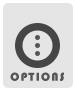
<style>
.page{position:relative;width:75px;height:90px;background:#e5e5e5}
.page>*{position:absolute;margin:0}
.t1{font:12px "Bauhaus93";letter-spacing:0.1em;color:#555555}
</style>
<div class="page">
<p class="t1" style="left:10px;top:72px;width:54px;height:9px">OPTIONS</p>
</div>
